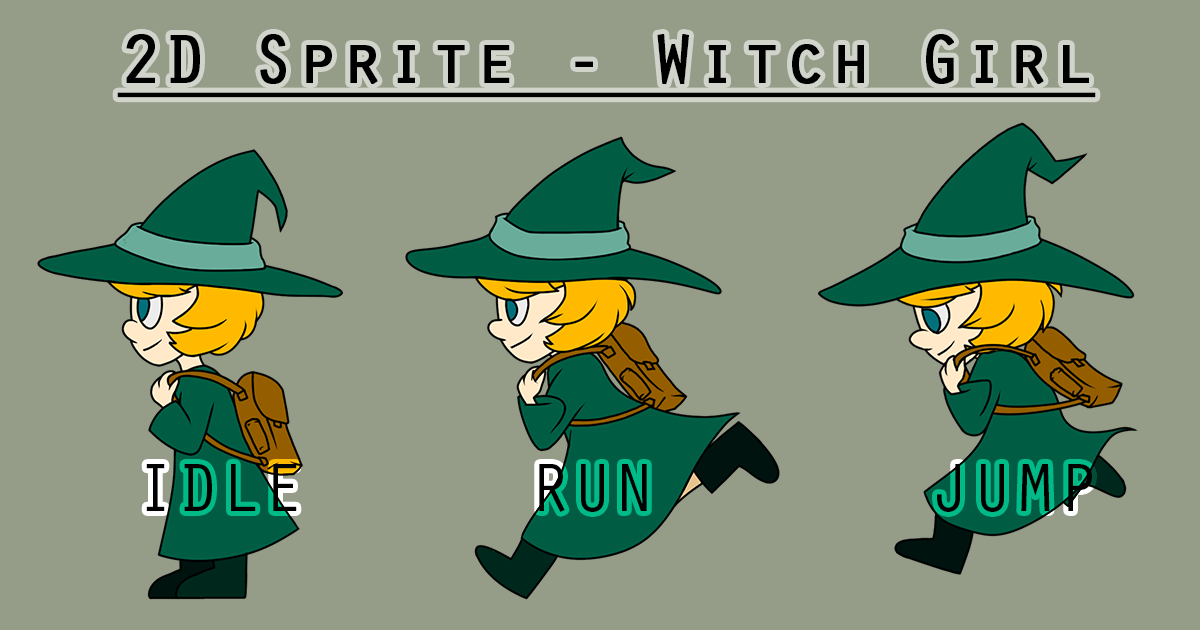
<style>
.page{position:relative;width:1200px;height:630px;background:#959d89}
.page>*{position:absolute;margin:0}
.t1{font:70.9px "OratorStd";color:#000000;font-weight:bold;text-decoration:underline}
.t2{font:70.9px "OratorStd";color:#000000}
</style>
<div class="page">
<p class="t1" style="left:117px;top:34px;width:979px;height:64px">2D Sprite - Witch Girl</p>
<p class="t2" style="left:146px;top:464px;width:151px;height:47px">IDLE</p>
<p class="t2" style="left:539px;top:464px;width:108px;height:48px">RUN</p>
<p class="t2" style="left:937px;top:464px;width:155px;height:48px">JUMP</p>
</div>
